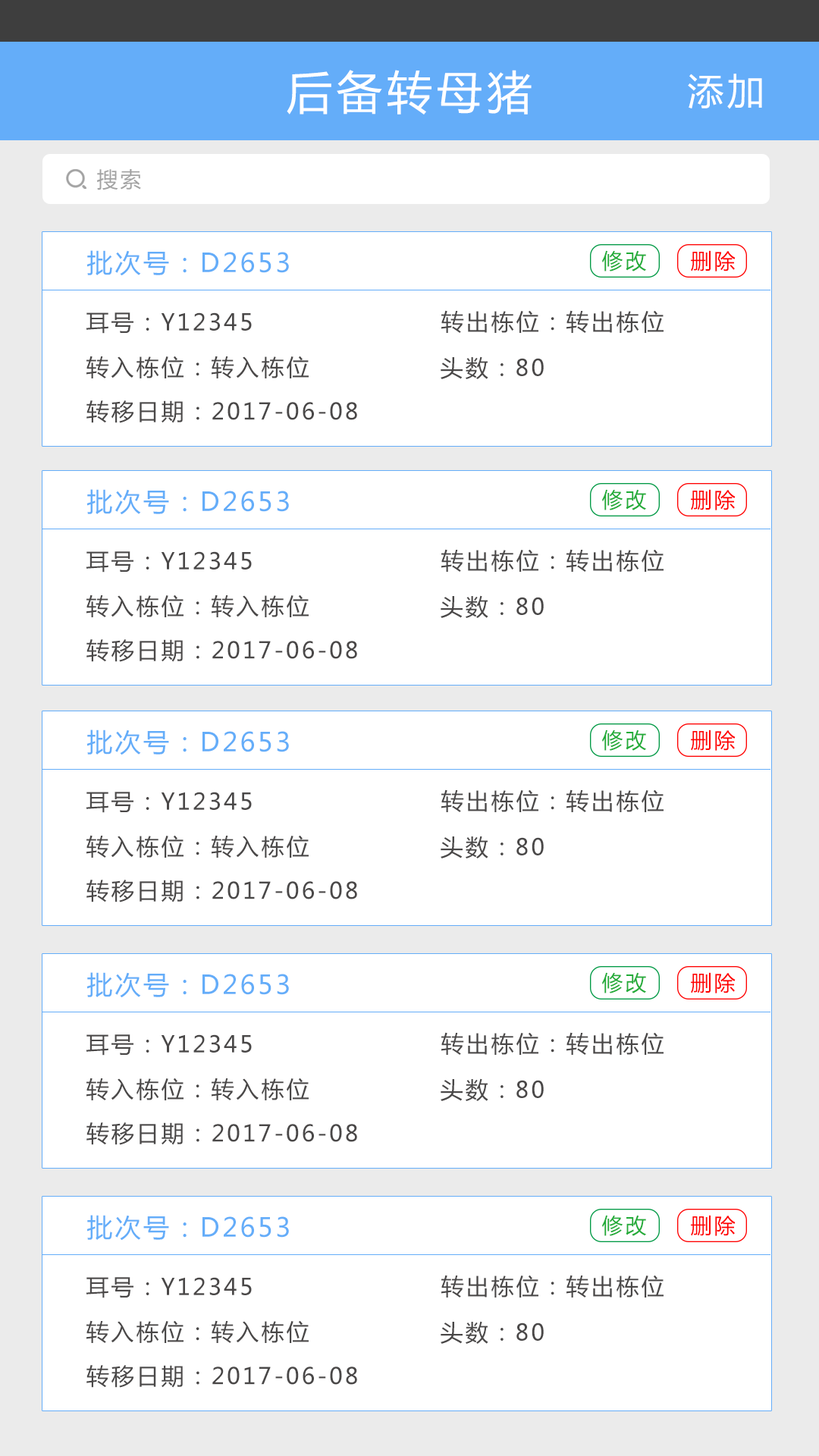
<style>
.page{position:relative;width:819px;height:1456px;background:#ffffff}
.page>*{position:absolute;margin:0}
.t1{font:45.5px "MicrosoftYaHei";letter-spacing:0.1em;color:#ffffff}
.t2{font:36.4px "MicrosoftYaHei";letter-spacing:0.1em;color:#ffffff}
.t3{font:21.2px "MicrosoftYaHei";letter-spacing:0.1em;color:#a3a3a3}
.t4{font:25.8px "MicrosoftYaHei";letter-spacing:0.1em;color:#64adf9}
.t5{font:21.2px "MicrosoftYaHei";letter-spacing:0.1em;color:#22ac38}
.t6{font:21.2px "MicrosoftYaHei";letter-spacing:0.1em;color:#ff0000}
.t7{font:22.7px "MicrosoftYaHei";letter-spacing:0.1em;color:#4a4848}
</style>
<div class="page">
<p class="t1" style="left:287px;top:70px;width:245px;height:45px">后备转母猪</p>
<p class="t2" style="left:688px;top:74px;width:74px;height:35px">添加</p>
<p class="t3" style="left:97px;top:169px;width:44px;height:21px">搜索</p>
<p class="t4" style="left:86px;top:250px;width:203px;height:26px">批次号：D2653</p>
<p class="t5" style="left:602px;top:250px;width:44px;height:21px">修改</p>
<p class="t6" style="left:691px;top:250px;width:45px;height:21px">删除</p>
<p class="t7" style="left:86px;top:312px;width:166px;height:22px">耳号：Y12345</p>
<p class="t7" style="left:441px;top:310px;width:223px;height:23px">转出栋位：转出栋位</p>
<p class="t7" style="left:86px;top:356px;width:223px;height:22px">转入栋位：转入栋位</p>
<p class="t7" style="left:441px;top:356px;width:103px;height:23px">头数：80</p>
<p class="t7" style="left:86px;top:400px;width:271px;height:23px">转移日期：2017-06-08</p>
<p class="t4" style="left:86px;top:489px;width:203px;height:26px">批次号：D2653</p>
<p class="t5" style="left:602px;top:489px;width:44px;height:21px">修改</p>
<p class="t6" style="left:691px;top:489px;width:45px;height:21px">删除</p>
<p class="t7" style="left:86px;top:551px;width:166px;height:22px">耳号：Y12345</p>
<p class="t7" style="left:441px;top:549px;width:223px;height:23px">转出栋位：转出栋位</p>
<p class="t7" style="left:86px;top:595px;width:223px;height:22px">转入栋位：转入栋位</p>
<p class="t7" style="left:441px;top:595px;width:103px;height:23px">头数：80</p>
<p class="t7" style="left:86px;top:639px;width:271px;height:23px">转移日期：2017-06-08</p>
<p class="t4" style="left:86px;top:730px;width:203px;height:25px">批次号：D2653</p>
<p class="t5" style="left:602px;top:730px;width:44px;height:21px">修改</p>
<p class="t6" style="left:691px;top:730px;width:45px;height:21px">删除</p>
<p class="t7" style="left:86px;top:792px;width:166px;height:21px">耳号：Y12345</p>
<p class="t7" style="left:441px;top:789px;width:223px;height:23px">转出栋位：转出栋位</p>
<p class="t7" style="left:86px;top:835px;width:223px;height:23px">转入栋位：转入栋位</p>
<p class="t7" style="left:441px;top:836px;width:103px;height:22px">头数：80</p>
<p class="t7" style="left:86px;top:880px;width:271px;height:22px">转移日期：2017-06-08</p>
<p class="t4" style="left:86px;top:972px;width:203px;height:26px">批次号：D2653</p>
<p class="t5" style="left:602px;top:972px;width:44px;height:21px">修改</p>
<p class="t6" style="left:691px;top:972px;width:45px;height:21px">删除</p>
<p class="t7" style="left:86px;top:1034px;width:166px;height:22px">耳号：Y12345</p>
<p class="t7" style="left:441px;top:1032px;width:223px;height:23px">转出栋位：转出栋位</p>
<p class="t7" style="left:86px;top:1078px;width:223px;height:22px">转入栋位：转入栋位</p>
<p class="t7" style="left:441px;top:1078px;width:103px;height:23px">头数：80</p>
<p class="t7" style="left:86px;top:1122px;width:271px;height:23px">转移日期：2017-06-08</p>
<p class="t4" style="left:86px;top:1215px;width:203px;height:26px">批次号：D2653</p>
<p class="t5" style="left:602px;top:1215px;width:44px;height:21px">修改</p>
<p class="t6" style="left:691px;top:1215px;width:45px;height:21px">删除</p>
<p class="t7" style="left:86px;top:1277px;width:166px;height:21px">耳号：Y12345</p>
<p class="t7" style="left:441px;top:1275px;width:223px;height:22px">转出栋位：转出栋位</p>
<p class="t7" style="left:86px;top:1320px;width:223px;height:23px">转入栋位：转入栋位</p>
<p class="t7" style="left:441px;top:1321px;width:103px;height:23px">头数：80</p>
<p class="t7" style="left:86px;top:1365px;width:271px;height:23px">转移日期：2017-06-08</p>
</div>
